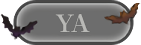
<style>
.page{position:relative;width:141px;height:45px;background:#6d6d6d}
.page>*{position:absolute;margin:0}
.t1{font:24px "RyuminPro-ExBold";letter-spacing:-0.08em;color:#b9b9b6}
</style>
<div class="page">
<p class="t1" style="left:55px;top:14px;width:35px;height:18px">YA</p>
</div>
